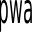
<style>
.page{position:relative;width:32px;height:32px;background:#ffffff}
.page>*{position:absolute;margin:0}
.t1{font:41.6px "DejaVuSans";color:#000000;scale:0.41 1}
</style>
<div class="page">
<p class="t1" style="left:0px;top:0px;width:32px;height:32px">pwa</p>
</div>
